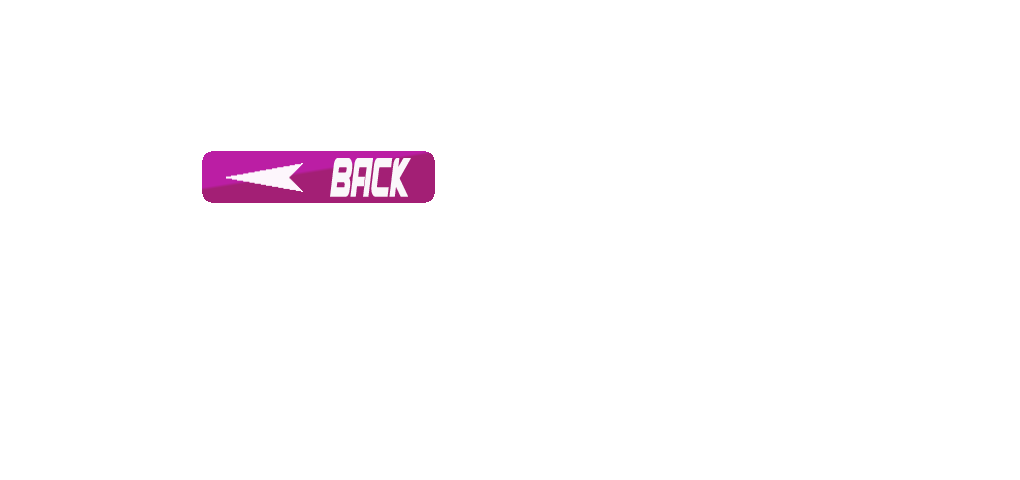
<style>
.page{position:relative;width:1020px;height:480px;background:#ffffff}
.page>*{position:absolute;margin:0}
.t1{font:100px "Spantaran";color:#faf7fa;font-weight:bold;scale:0.5 1}
</style>
<div class="page">
<p class="t1" style="left:330px;top:158px;width:81px;height:39px">BACK</p>
</div>
